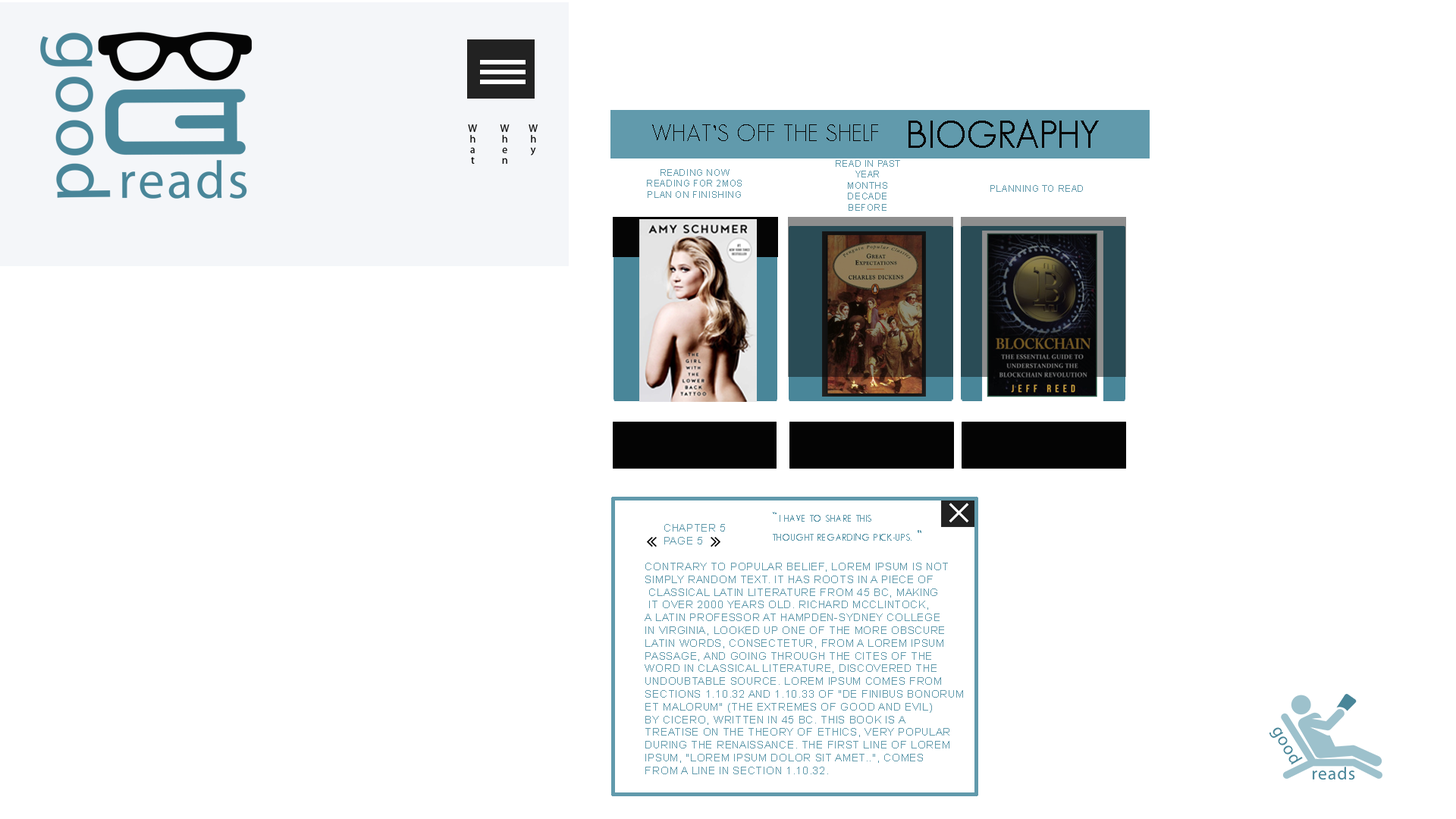
<style>
.page{position:relative;width:1456px;height:819px;background:#ffffff}
.page>*{position:absolute;margin:0}
.t1{font:23.4px "MAXIMO";letter-spacing:0.05em;color:#070707;text-transform:uppercase}
.t2{font:37.4px "MAXIMOBold";letter-spacing:0.05em;color:#070707;text-transform:uppercase}
.t3{font:9.1px "ArialMT";letter-spacing:0.05em;color:#619aac;text-transform:uppercase}
.t4{font:10px "MAXIMO";letter-spacing:0.05em;color:#619aac;text-transform:uppercase}
.t5{font:15.6px "MAXIMO";letter-spacing:0.05em;color:#619aac;text-transform:uppercase}
.t6{font:10.6px "ArialMT";letter-spacing:0.05em;color:#619aac;text-transform:uppercase}
</style>
<div class="page">
<p class="t1" style="left:652px;top:124px;width:226px;height:17px">What’s off the Shelf</p>
<p class="t2" style="left:908px;top:119px;width:191px;height:29px">Biography</p>
<p class="t3" style="left:836px;top:160px;width:64px;height:51px;text-align:center">Read in past<br>Year<br>Months<br>decade<br>Before</p>
<p class="t3" style="left:647px;top:169px;width:95px;height:29px;text-align:center">Reading Now<br>Reading for 2mos<br>plan on finishing</p>
<p class="t3" style="left:990px;top:185px;width:93px;height:7px">Planning to Read</p>
<p class="t4" style="left:773px;top:512px;width:148px;height:29px"><span class="t5">“</span>I have to Share this <br>thought regarding Pick-ups.<span class="t5"> ”</span></p>
<p class="t6" style="left:664px;top:524px;width:61px;height:20px">Chapter 5<br>page 5</p>
<p class="t6" style="left:645px;top:563px;width:318px;height:211px">Contrary to popular belief, Lorem Ipsum is not<br>simply random text. It has roots in a piece of<br> classical Latin literature from 45 BC, making<br> it over 2000 years old. Richard McClintock,<br>a Latin professor at Hampden-Sydney College<br>in Virginia, looked up one of the more obscure<br>Latin words, consectetur, from a Lorem Ipsum<br>passage, and going through the cites of the<br>word in classical literature, discovered the <br>undoubtable source. Lorem Ipsum comes from<br>sections 1.10.32 and 1.10.33 of "de Finibus Bonorum<br>et Malorum" (The Extremes of Good and Evil)<br>by Cicero, written in 45 BC. This book is a<br>treatise on the theory of ethics, very popular<br>during the Renaissance. The first line of Lorem<br>Ipsum, "Lorem ipsum dolor sit amet..", comes<br>from a line in section 1.10.32.</p>
</div>
